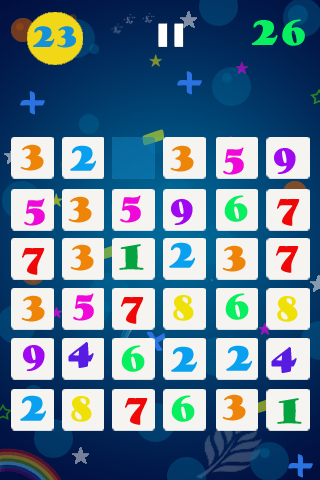
<style>
.page{position:relative;width:320px;height:480px;background:#f6f4f1}
.page>*{position:absolute;margin:0}
.t1{font:27.6px "GoudyStout";letter-spacing:-0.01em;color:#1491d9}
.t2{font:33.3px "GoudyStout";letter-spacing:-0.01em;color:#08ef5f}
.t3{font:33.3px "GoudyStout";letter-spacing:-0.01em;color:#ef8508}
.t4{font:33.3px "GoudyStout";letter-spacing:-0.01em;color:#08a0ef}
.t5{font:33.3px "GoudyStout";letter-spacing:-0.01em;color:#ef08d7}
.t6{font:33.3px "GoudyStout";letter-spacing:-0.01em;color:#a008ef}
.t7{font:33.3px "GoudyStout";letter-spacing:-0.01em;color:#ef0808}
.t8{font:33.3px "GoudyStout";letter-spacing:-0.01em;color:#04a340}
.t9{font:33.3px "GoudyStout";letter-spacing:-0.01em;color:#efe108}
.t10{font:33.3px "GoudyStout";letter-spacing:-0.01em;color:#581be2}
</style>
<div class="page">
<p class="t1" style="left:33px;top:26px;width:43px;height:22px">23</p>
<p class="t2" style="left:251px;top:19px;width:54px;height:27px">26</p>
<p class="t3" style="left:20px;top:144px;width:24px;height:27px">3</p>
<p class="t4" style="left:70px;top:145px;width:26px;height:26px">2</p>
<p class="t3" style="left:170px;top:145px;width:24px;height:27px">3</p>
<p class="t5" style="left:223px;top:147px;width:21px;height:28px">5</p>
<p class="t6" style="left:274px;top:148px;width:22px;height:26px">9</p>
<p class="t5" style="left:24px;top:198px;width:21px;height:28px">5</p>
<p class="t3" style="left:68px;top:196px;width:24px;height:27px">3</p>
<p class="t5" style="left:120px;top:195px;width:21px;height:28px">5</p>
<p class="t2" style="left:224px;top:195px;width:24px;height:27px">6</p>
<p class="t6" style="left:171px;top:199px;width:22px;height:26px">9</p>
<p class="t7" style="left:277px;top:199px;width:23px;height:27px">7</p>
<p class="t3" style="left:70px;top:244px;width:24px;height:27px">3</p>
<p class="t8" style="left:119px;top:244px;width:25px;height:26px">1</p>
<p class="t4" style="left:169px;top:242px;width:26px;height:26px">2</p>
<p class="t3" style="left:222px;top:245px;width:24px;height:27px">3</p>
<p class="t7" style="left:276px;top:246px;width:23px;height:27px">7</p>
<p class="t7" style="left:22px;top:248px;width:23px;height:27px">7</p>
<p class="t5" style="left:73px;top:293px;width:21px;height:28px">5</p>
<p class="t2" style="left:225px;top:293px;width:24px;height:27px">6</p>
<p class="t3" style="left:21px;top:295px;width:24px;height:27px">3</p>
<p class="t7" style="left:121px;top:297px;width:23px;height:27px">7</p>
<p class="t9" style="left:173px;top:295px;width:21px;height:26px">8</p>
<p class="t9" style="left:277px;top:296px;width:21px;height:26px">8</p>
<p class="t10" style="left:68px;top:342px;width:26px;height:26px">4</p>
<p class="t6" style="left:23px;top:345px;width:22px;height:26px">9</p>
<p class="t2" style="left:121px;top:345px;width:24px;height:27px">6</p>
<p class="t4" style="left:171px;top:346px;width:26px;height:26px">2</p>
<p class="t4" style="left:226px;top:345px;width:26px;height:26px">2</p>
<p class="t10" style="left:271px;top:347px;width:26px;height:26px">4</p>
<p class="t4" style="left:20px;top:395px;width:26px;height:26px">2</p>
<p class="t9" style="left:71px;top:396px;width:21px;height:26px">8</p>
<p class="t7" style="left:125px;top:398px;width:23px;height:27px">7</p>
<p class="t2" style="left:171px;top:395px;width:24px;height:27px">6</p>
<p class="t3" style="left:222px;top:394px;width:24px;height:27px">3</p>
<p class="t8" style="left:277px;top:398px;width:25px;height:26px">1</p>
</div>
